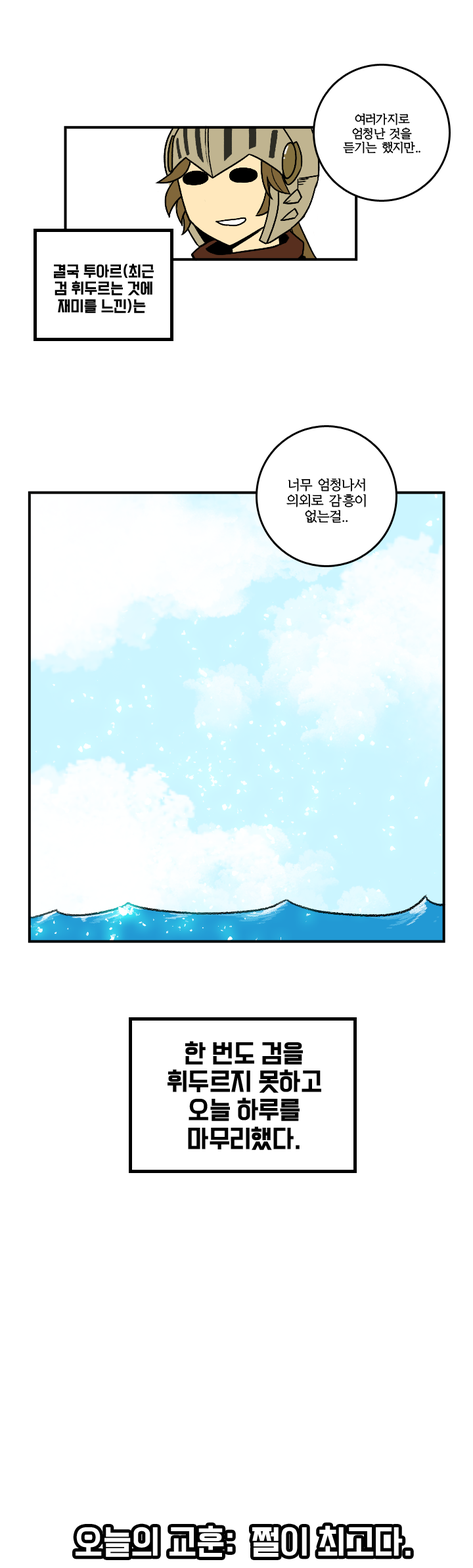
<style>
.page{position:relative;width:473px;height:1568px;background:#ffffff}
.page>*{position:absolute;margin:0}
.t1{font:11.8px "KoreanYMJ-B";color:#000000}
.t2{font:14.5px "TTComsetakR";color:#000000}
.t3{font:13.1px "KoreanYMJ-B";color:#000000}
.t4{font:23.7px "TTComsetakR";color:#000000}
.t5{font:31.5px "TTComsetakR";color:#ffffff}
</style>
<div class="page">
<p class="t1" style="left:343px;top:113px;width:78px;height:41px;text-align:center">여러가지로<br>엄청난 것을<br>듣기는 했지만..</p>
<p class="t2" style="left:54px;top:264px;width:100px;height:49px;text-align:center">결국 투아르(최근<br>검 휘두르는 것에<br>재미를 느낀)는</p>
<p class="t3" style="left:287px;top:478px;width:79px;height:45px;text-align:center">너무 엄청나서<br>의외로 감흥이<br>없는걸..</p>
<p class="t4" style="left:168px;top:1041px;width:153px;height:109px;text-align:center">한 번도 검을<br>휘두르지 못하고<br>오늘 하루를<br>마무리했다.</p>
<p class="t5" style="left:76px;top:1525px;width:335px;height:32px">오늘의 교훈:  쩔이 최고다.</p>
</div>
